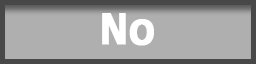
<style>
.page{position:relative;width:256px;height:64px;background:#afafaf}
.page>*{position:absolute;margin:0}
.t1{font:48px "Consolas-Bold";color:#ffffff;font-weight:bold}
</style>
<div class="page">
<p class="t1" style="left:102px;top:13px;width:52px;height:33px">No</p>
</div>
